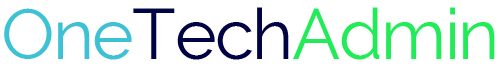
<style>
.page{position:relative;width:500px;height:69px;background:#ffffff}
.page>*{position:absolute;margin:0}
.t1{font:70.4px "Raleway";letter-spacing:-0.02em;color:#21eb57}
.t2{font:70.4px "Raleway";letter-spacing:-0.02em;color:#3ec1d5}
.t3{font:70.4px "Raleway";letter-spacing:-0.02em;color:#000444}
</style>
<div class="page">
<p class="t1" style="left:4px;top:7px;width:491px;height:53px"><span class="t2">One</span><span class="t3">Tech</span>Admin</p>
</div>
